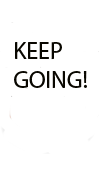
<style>
.page{position:relative;width:101px;height:171px;background:#ffffff}
.page>*{position:absolute;margin:0}
.t1{font:24px "MyriadPro-Regular";color:#090700}
</style>
<div class="page">
<p class="t1" style="left:14px;top:42px;width:73px;height:46px">KEEP <br>GOING!</p>
</div>
